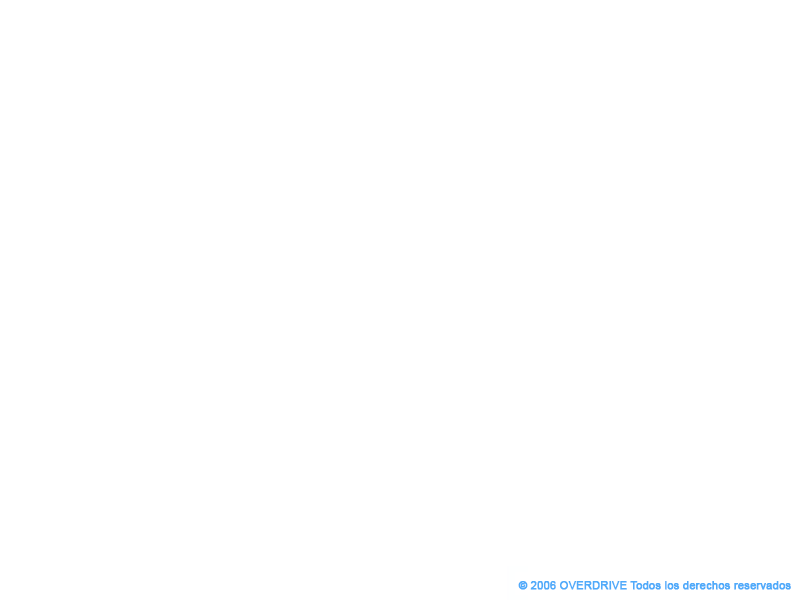
<style>
.page{position:relative;width:800px;height:600px;background:#ffffff}
.page>*{position:absolute;margin:0}
.t1{font:11px "ArialMT";color:#50abfa;font-weight:bold}
</style>
<div class="page">
<p class="t1" style="left:518px;top:581px;width:273px;height:9px">© 2006 OVERDRIVE Todos los derechos reservados</p>
</div>
